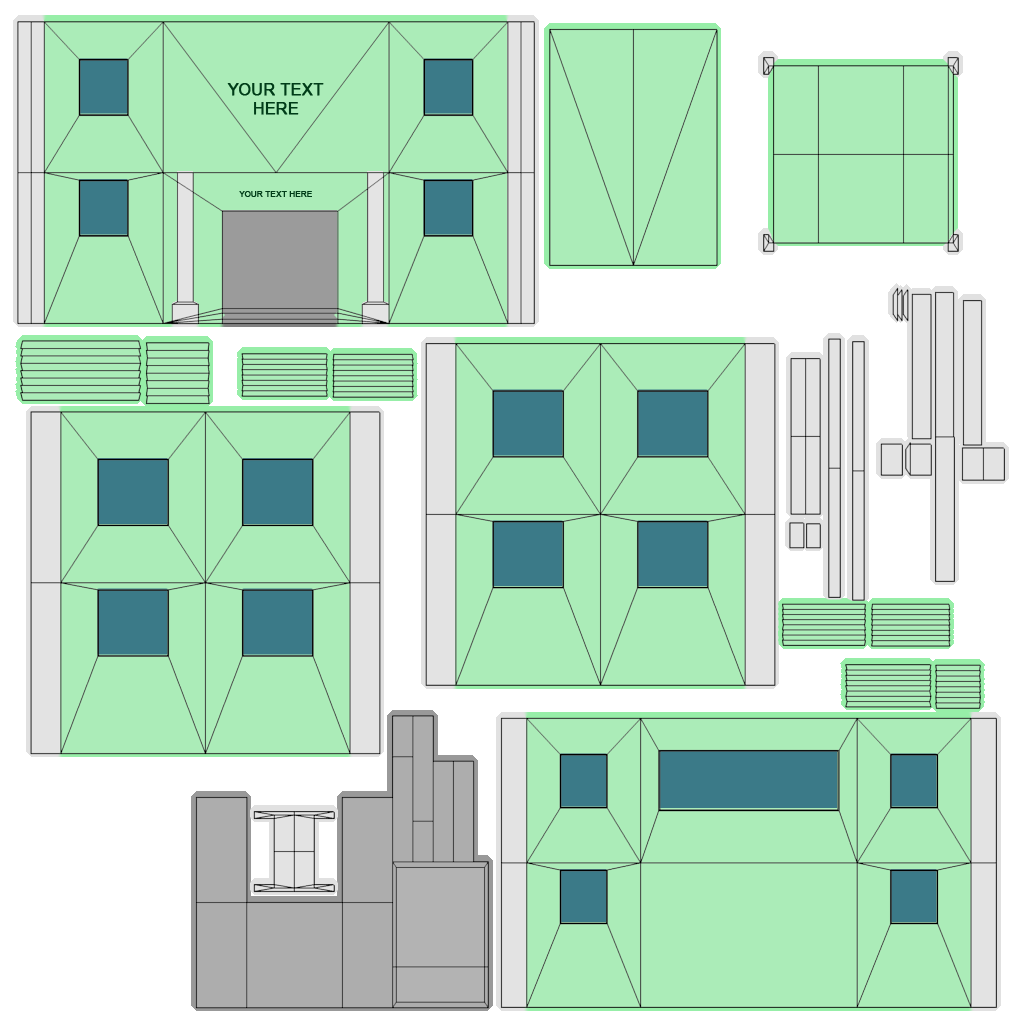
<style>
.page{position:relative;width:1024px;height:1024px;background:#abecb8}
.page>*{position:absolute;margin:0}
.t1{font:16.2px "ArialMT";color:#003c18;font-weight:bold}
.t2{font:8px "ArialMT";color:#003c18;font-weight:bold}
</style>
<div class="page">
<p class="t1" style="left:227px;top:83px;width:97px;height:32px;text-align:center">YOUR TEXT<br>HERE</p>
<p class="t2" style="left:239px;top:191px;width:73px;height:6px">YOUR TEXT HERE</p>
</div>
